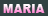
<style>
.page{position:relative;width:48px;height:16px;background:#314242}
.page>*{position:absolute;margin:0}
.t1{font:12.2px "Arial-Black";scale:0.93 1}
</style>
<div class="page">
<p class="t1" style="left:3px;top:4px;width:42px;height:9px">MARIA</p>
</div>
